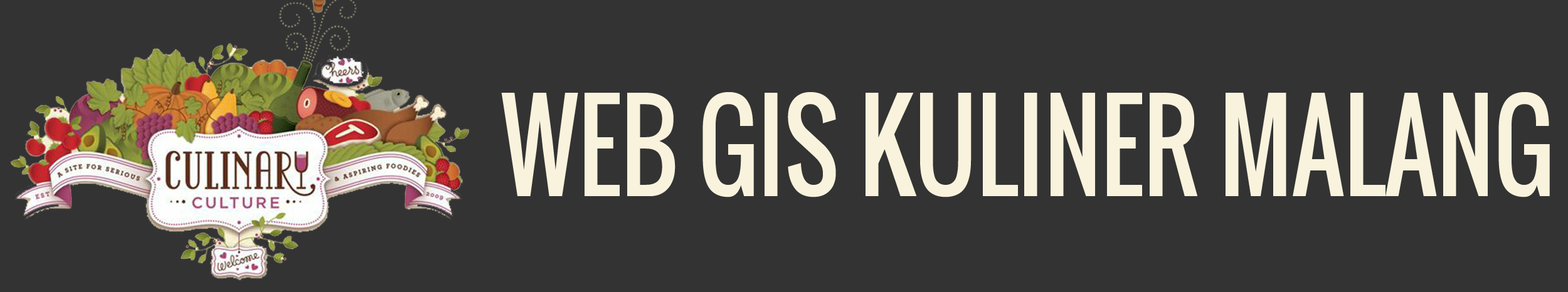
<style>
.page{position:relative;width:1568px;height:292px;background:#333333}
.page>*{position:absolute;margin:0}
.t1{font:118px "Oswald-Regular";color:#f9f3dd;scale:0.86 1}
</style>
<div class="page">
<p class="t1" style="left:501px;top:92px;width:1049px;height:106px">WEB GIS KULINER MALANG</p>
</div>
